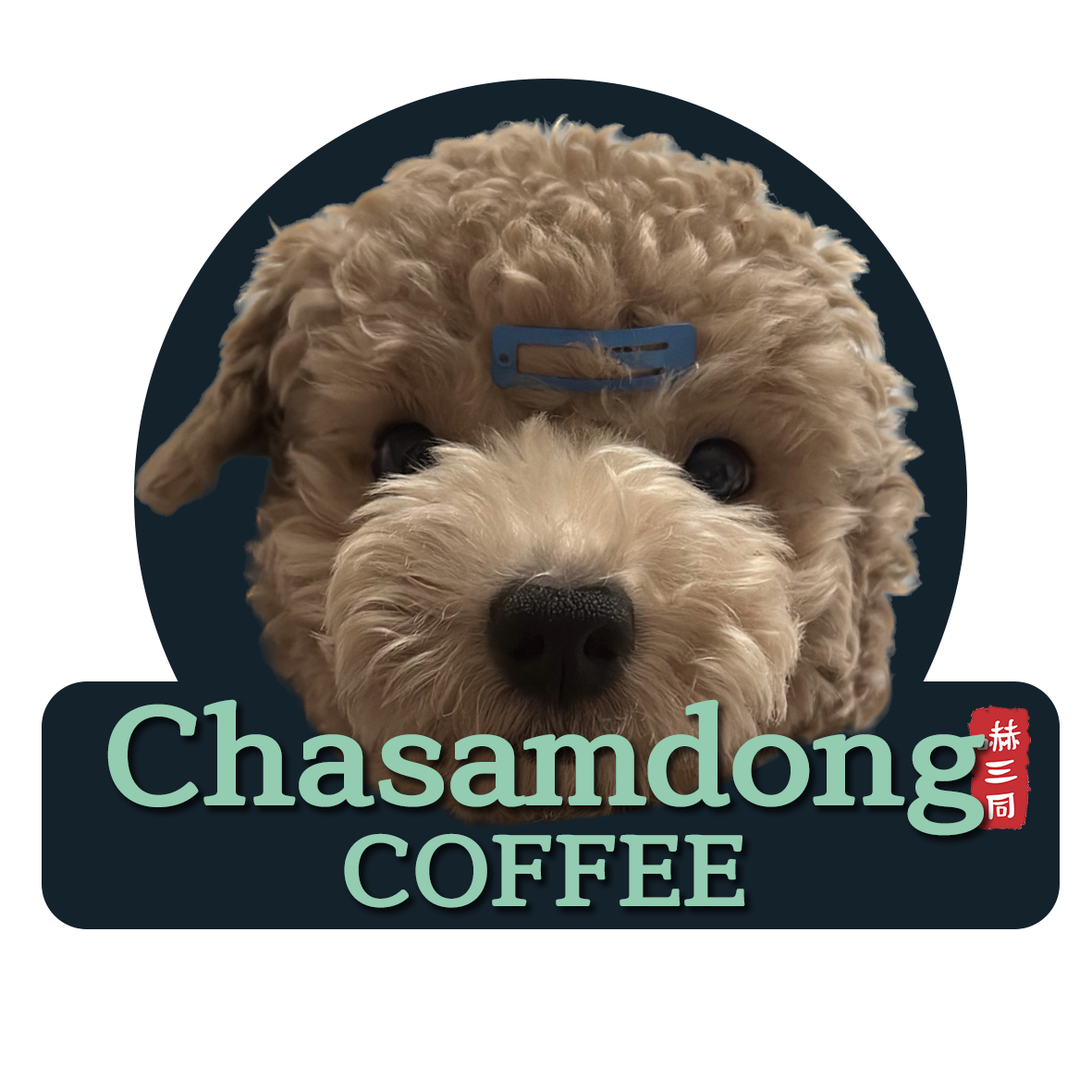
<style>
.page{position:relative;width:1092px;height:1092px;background:#ffffff}
.page>*{position:absolute;margin:0}
.t1{font:134.8px/100.9px "KimjungchulMyungjo-Bold";letter-spacing:-0.025em;color:#93ccb1;scale:1.08 1}
.t2{font:96.3px/100.9px "KimjungchulMyungjo-Bold";letter-spacing:-0.025em;color:#93ccb1;scale:1.08 1}
</style>
<div class="page">
<p class="t1" style="left:107px;top:699px;width:878px;height:209px;text-align:center">Chasamdong<br><span class="t2">COFFEE</span></p>
</div>
